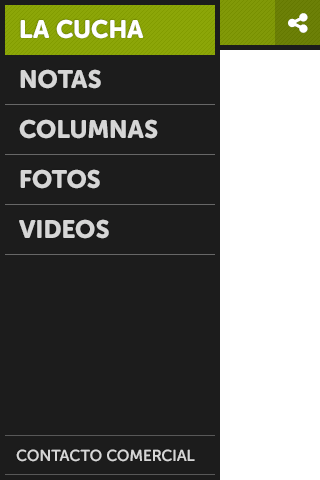
<style>
.page{position:relative;width:320px;height:480px;background:#1c1c1c}
.page>*{position:absolute;margin:0}
.t1{font:25px "MuseoSansRounded-900";color:#ffffff;text-transform:uppercase}
.t2{font:25px "MuseoSansRounded-900";color:#d6d6d6;text-transform:uppercase}
.t3{font:16px "MuseoSansRounded-700";color:#d6d6d6;text-transform:uppercase}
</style>
<div class="page">
<p class="t1" style="left:20px;top:19px;width:124px;height:20px">La cucha</p>
<p class="t2" style="left:20px;top:69px;width:81px;height:20px">NOTAS</p>
<p class="t2" style="left:19px;top:119px;width:139px;height:20px">COLUMNAS</p>
<p class="t2" style="left:20px;top:169px;width:80px;height:20px">FOTOS</p>
<p class="t2" style="left:19px;top:219px;width:90px;height:20px">VIDEOS</p>
<p class="t3" style="left:16px;top:449px;width:179px;height:13px">Contacto comercial</p>
</div>
